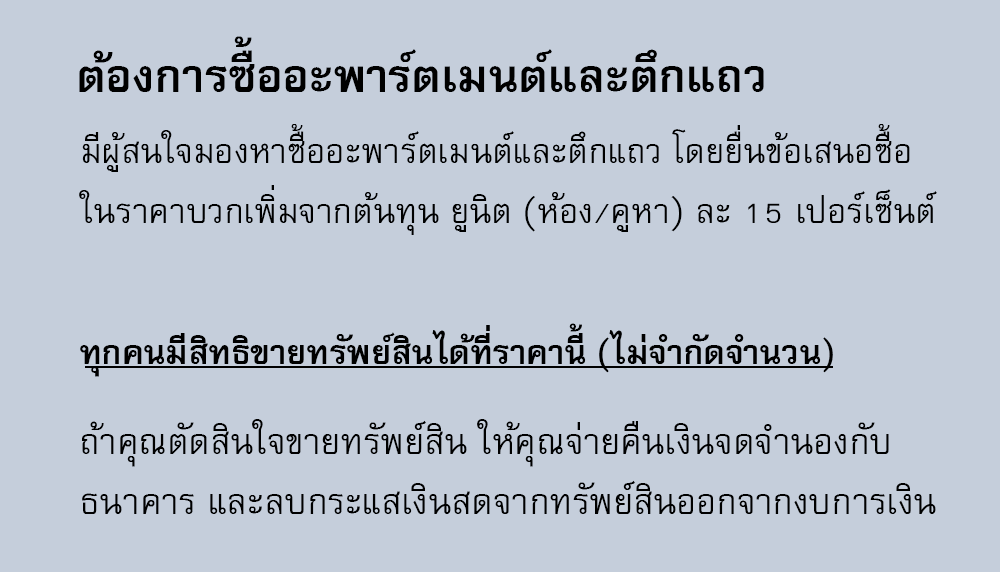
<style>
.page{position:relative;width:1000px;height:572px;background:#c5cedb}
.page>*{position:absolute;margin:0}
.t1{font:64px "FreesiaUPCBold";color:#000000}
.t2{font:48px/60px "FreesiaUPC";color:#000000}
.t3{font:47px "FreesiaUPCBold";color:#000000}
.t4{font:50px/60px "FreesiaUPC";color:#000000}
</style>
<div class="page">
<p class="t1" style="left:79px;top:36px;width:685px;height:56px">ต้องการซื้ออะพาร์ตเมนต์และตึกแถว</p>
<p class="t2" style="left:79px;top:124px;width:858px;height:111px">มีผู้สนใจมองหาซื้ออะพาร์ตเมนต์และตึกแถว โดยยื่นข้อเสนอซื้อ<br>ในราคาบวกเพิ่มจากต้นทุน ยูนิต (ห้อง/คูหา) ละ 15 เปอร์เซ็นต์</p>
<p class="t3" style="left:80px;top:323px;width:753px;height:54px">ทุกคนมีสิทธิขายทรัพย์สินได้ที่ราคานี้ (ไม่จำกัดจำนวน)</p>
<p class="t4" style="left:82px;top:419px;width:854px;height:95px">ถ้าคุณตัดสินใจขายทรัพย์สิน ให้คุณจ่ายคืนเงินจดจำนองกับ<br>ธนาคาร และลบกระแสเงินสดจากทรัพย์สินออกจากงบการเงิน</p>
</div>
